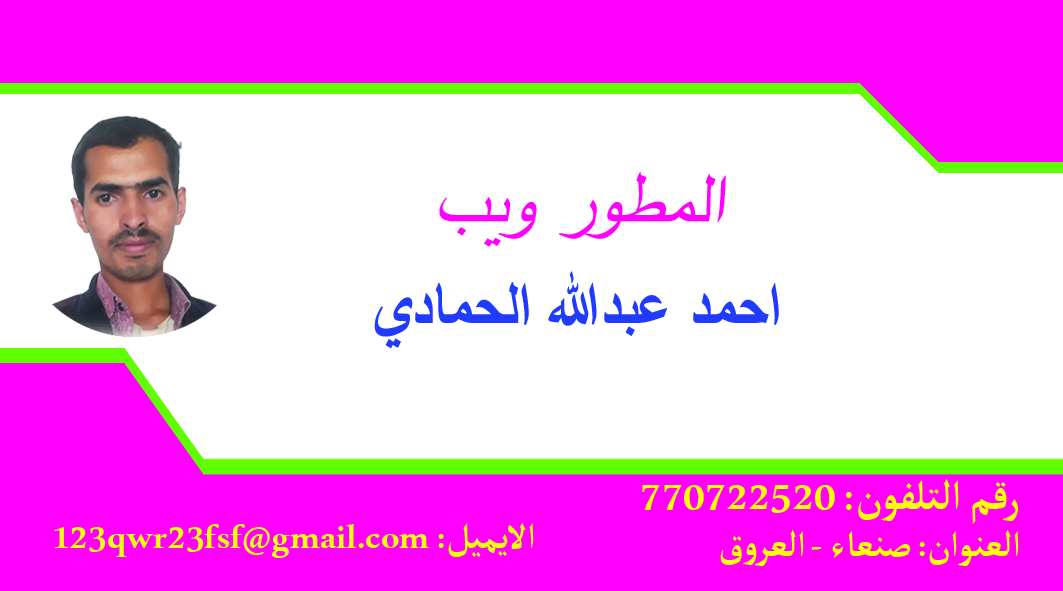
<style>
.page{position:relative;width:1063px;height:591px;background:#ffffff}
.page>*{position:absolute;margin:0}
.t1{font:75px "SimplifiedArabic";color:#ff00ff;font-style:italic}
.t2{font:65px "SimplifiedArabic-Bold";color:#1e3bff;scale:0.93 1}
.t3{font:65px "SimplifiedArabic";color:#1e3bff;scale:0.93 1}
.t4{font:58.3px "MicrosoftUighur-Bold";color:#ffff00}
.t5{font:50px "MicrosoftUighur-Bold";color:#efff09}
.t6{font:50px "MicrosoftUighur-Bold";color:#ffff00}
</style>
<div class="page">
<p class="t1" style="left:439px;top:172px;width:287px;height:75px">المطور ويب</p>
<p class="t2" style="left:374px;top:271px;width:405px;height:78px"><span class="t3"><br></span>احمد عبدالله الحمادي</p>
<p class="t4" style="left:642px;top:479px;width:376px;height:45px">770722520 :رقم التلفون</p>
<p class="t5" style="left:54px;top:523px;width:480px;height:35px">123qwr23fsf@gmail.com :الايميل</p>
<p class="t6" style="left:720px;top:530px;width:299px;height:36px">العنوان: صنعاء - العروق</p>
</div>
